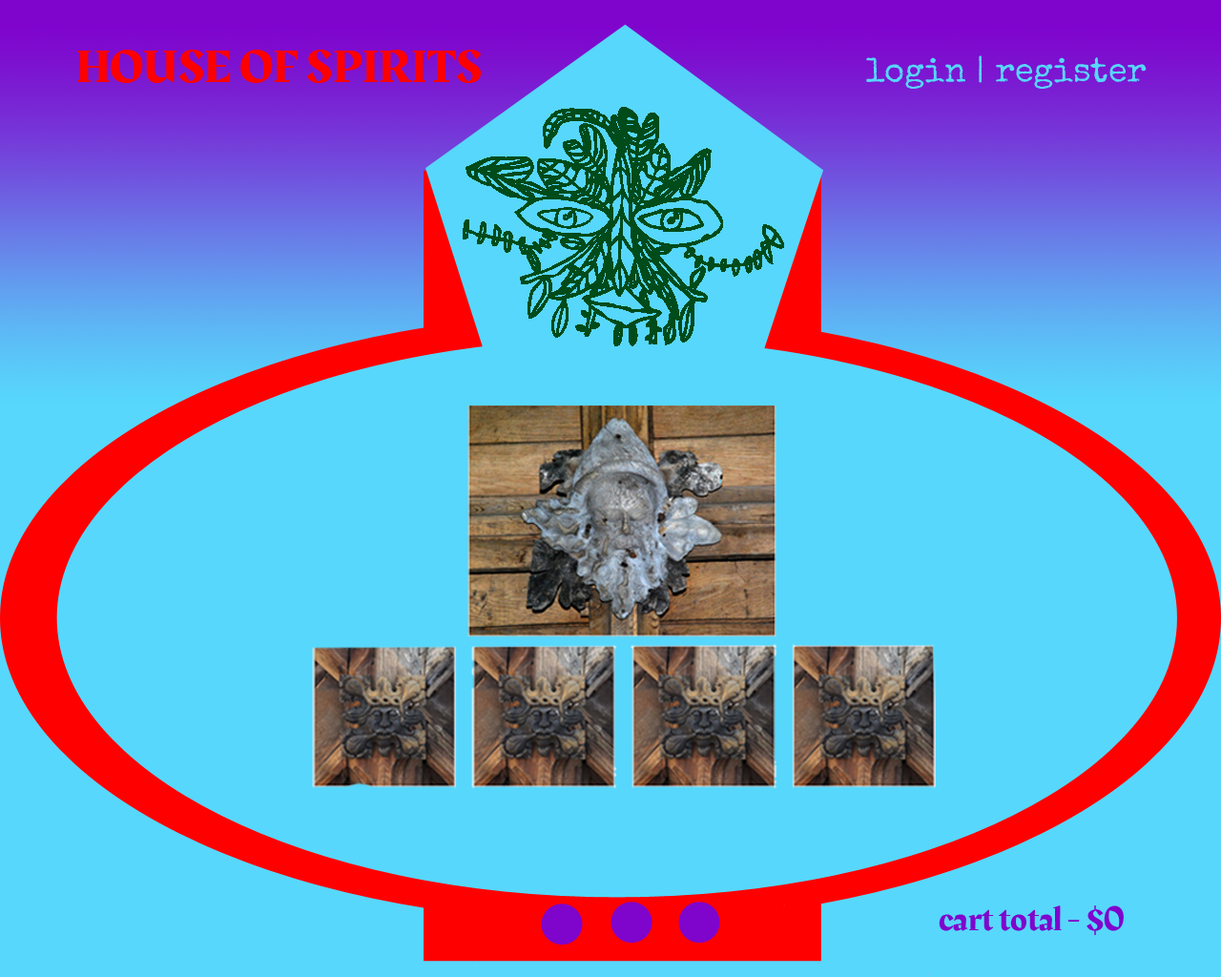
<style>
.page{position:relative;width:1221px;height:977px;background:#57d7fc}
.page>*{position:absolute;margin:0}
.t1{font:47.7px "Rakkas-Regular";color:#ff0000}
.t2{font:34.3px "SpecialElite-Regular";color:#57d7fc}
.t3{font:34.3px "Rakkas-Regular";color:#7f05cd}
</style>
<div class="page">
<p class="t1" style="left:77px;top:50px;width:405px;height:33px">HOUSE OF SPIRITS</p>
<p class="t2" style="left:866px;top:55px;width:280px;height:34px">login | register</p>
<p class="t3" style="left:939px;top:905px;width:185px;height:30px">cart total - $0</p>
</div>
